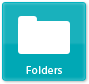
<style>
.page{position:relative;width:89px;height:84px;background:#ffffff}
.page>*{position:absolute;margin:0}
.t1{font:11px "MyriadPro-Regular";letter-spacing:0.04em;color:#ffffff}
</style>
<div class="page">
<p class="t1" style="left:26px;top:66px;width:36px;height:8px">Folders</p>
</div>
